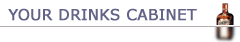
<style>
.page{position:relative;width:240px;height:42px;background:#ffffff}
.page>*{position:absolute;margin:0}
.t1{font:15px "Verdana";color:#636388;font-weight:bold}
</style>
<div class="page">
<p class="t1" style="left:8px;top:8px;width:189px;height:13px">YOUR DRINKS CABINET</p>
</div>
